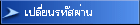
<style>
.page{position:relative;width:140px;height:25px}
.page>*{position:absolute;margin:0}
.t1{font:15.3px "EucrosiaDSE";color:#ffffff;scale:1.12 1}
</style>
<div class="page">
<p class="t1" style="left:25px;top:4px;width:67px;height:12px">à»ÅÕèÂ¹ÃËÑÊ¼èÒ¹</p>
</div>
